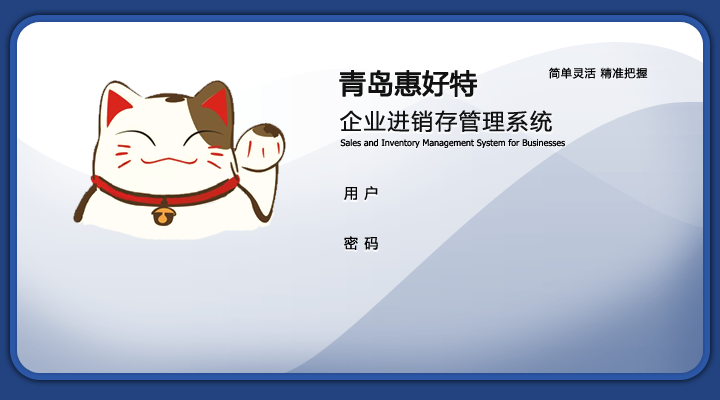
<style>
.page{position:relative;width:720px;height:400px}
.page>*{position:absolute;margin:0}
.t1{font:27px "MicrosoftYaHei";color:#111111;font-weight:bold}
.t2{font:11px "MicrosoftYaHei";letter-spacing:0.08em;color:#000000}
.t3{font:22px "MicrosoftYaHei";letter-spacing:0.08em;color:#111111}
.t4{font:9px "Tahoma";color:#000000}
.t5{font:14px "MicrosoftYaHei";letter-spacing:0.08em;color:#000000}
</style>
<div class="page">
<p class="t1" style="left:339px;top:69px;width:138px;height:28px">青岛惠好特</p>
<p class="t2" style="left:549px;top:67px;width:99px;height:12px">简单灵活 精准把握</p>
<p class="t3" style="left:340px;top:110px;width:212px;height:22px">企业进销存管理系统</p>
<p class="t4" style="left:340px;top:139px;width:225px;height:9px">Sales and Inventory Management System for Businesses</p>
<p class="t5" style="left:344px;top:186px;width:34px;height:14px">用 户</p>
<p class="t5" style="left:344px;top:236px;width:34px;height:14px">密 码</p>
</div>
